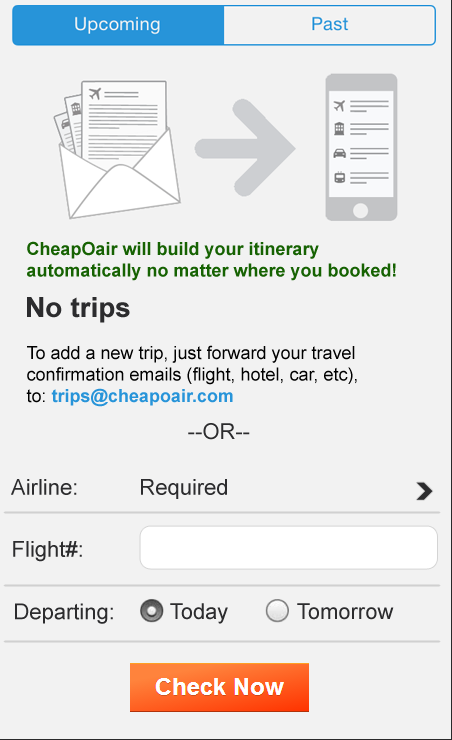
<style>
.page{position:relative;width:452px;height:740px;background:#f2f2f2}
.page>*{position:absolute;margin:0}
.t1{font:18px "Arial-BoldMT";color:#166202}
.t2{font:28px "Arial-BoldMT";color:#2c2c2e}
.t3{font:18px "ArialMT";color:#000000}
.t4{font:18px "Arial-BoldMT";color:#2794d9}
.t5{font:22px "ArialMT";color:#2c2c2e}
</style>
<div class="page">
<p class="t1" style="left:27px;top:241px;width:369px;height:40px">CheapOair will build your itinerary automatically no matter where you booked!</p>
<p class="t2" style="left:27px;top:297px;width:103px;height:26px">No trips</p>
<p class="t3" style="left:26px;top:345px;width:331px;height:62px">To add a new trip, just forward your travel confirmation emails (flight, hotel, car, etc), <br>to: <span class="t4">trips@cheapoair.com</span></p>
<p class="t5" style="left:188px;top:423px;width:62px;height:17px">--OR--</p>
<p class="t5" style="left:11px;top:479px;width:66px;height:16px">Airline:</p>
<p class="t5" style="left:141px;top:479px;width:86px;height:20px">Required</p>
<p class="t5" style="left:13px;top:541px;width:69px;height:21px">Flight#:</p>
<p class="t5" style="left:15px;top:603px;width:98px;height:21px">Departing:</p>
<p class="t5" style="left:170px;top:603px;width:58px;height:21px">Today</p>
<p class="t5" style="left:297px;top:603px;width:97px;height:17px">Tomorrow</p>
</div>
